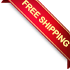
<style>
.page{position:relative;width:70px;height:70px;background:#ffffff}
.page>*{position:absolute;margin:0}
.t1{font:8.3px "ArialRoundedMTBold";letter-spacing:-0.025em;color:#fdf598}
</style>
<div class="page">
<p class="t1" style="left:22px;top:0px;width:48px;height:47px;rotate:44deg">FREE SHIPPING</p>
</div>
